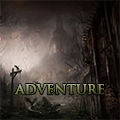
<style>
.page{position:relative;width:120px;height:120px}
.page>*{position:absolute;margin:0}
.t1{font:13px "TrajanPro-Bold"}
</style>
<div class="page">
<p class="t1" style="left:14px;top:84px;width:91px;height:11px">ADVENTURE</p>
</div>
